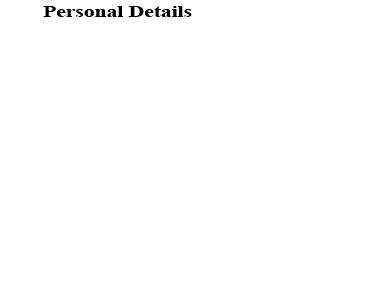
<style>
.page{position:relative;width:380px;height:300px;background:#ffffff}
.page>*{position:absolute;margin:0}
.t1{font:17px "TimesNewRomanPS-BoldMT";color:#000000;scale:1.27 1}
</style>
<div class="page">
<p class="t1" style="left:43px;top:6px;width:149px;height:11px">Personal Details</p>
</div>
